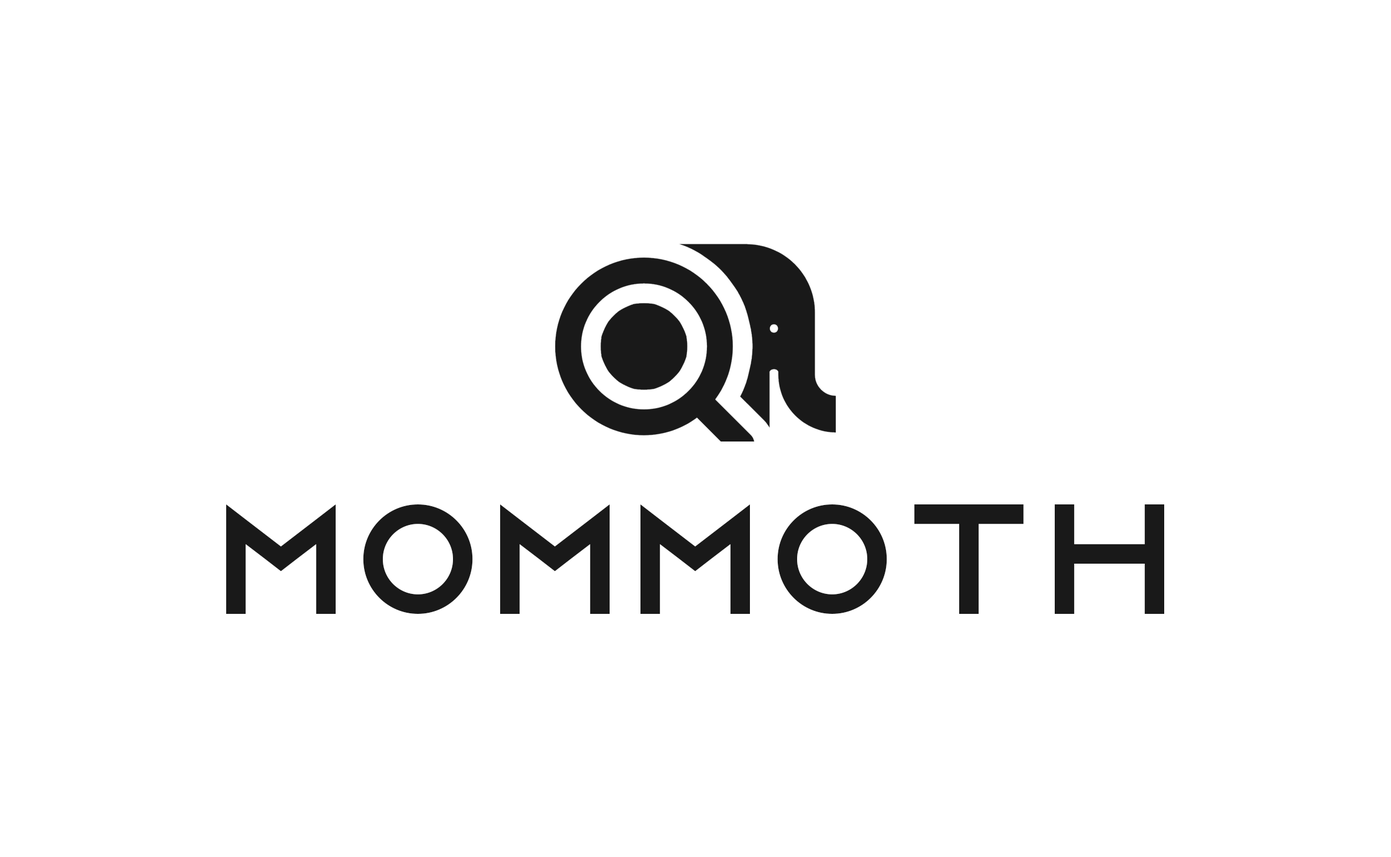
<style>
.page{position:relative;width:1391px;height:857px;background:#ffffff}
.page>*{position:absolute;margin:0}
.t1{font:156.2px "AzonixRegular";letter-spacing:0.1em;color:#191919}
</style>
<div class="page">
<p class="t1" style="left:226px;top:504px;width:938px;height:110px">mommoth</p>
</div>
